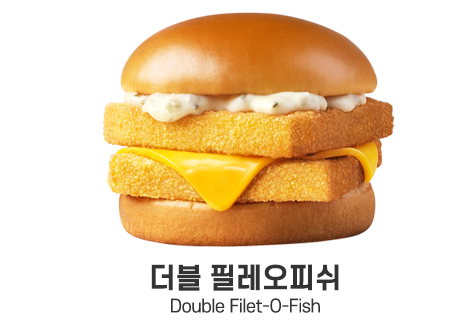
<style>
.page{position:relative;width:460px;height:330px;background:#ffffff}
.page>*{position:absolute;margin:0}
.t1{font:17.5px/24px "S-CoreDream-4Regular";letter-spacing:-0.02em;color:#333333}
.t2{font:28px/24px "S-CoreDream-6Bold";letter-spacing:-0.02em;color:#333333}
</style>
<div class="page">
<p class="t1" style="left:151px;top:264px;width:188px;height:49px;text-align:center"><span class="t2">더블 필레오피쉬<br></span>Double Filet-O-Fish</p>
</div>
